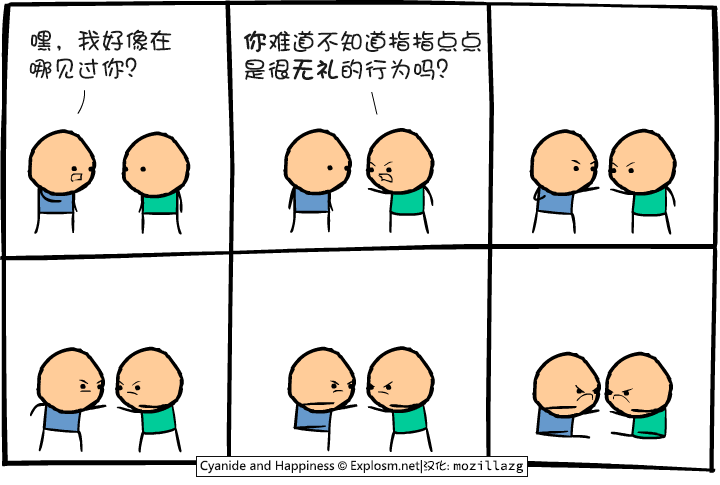
<style>
.page{position:relative;width:720px;height:485px;background:#ffffff}
.page>*{position:absolute;margin:0}
.t1{font:24px/28px "DFPShaoNvW5";color:#1b1b1b}
.t2{font:24px/28px "DFPShaoNvW5";color:#1b1b1b;font-weight:bold}
</style>
<div class="page">
<p class="t1" style="left:29px;top:29px;width:143px;height:50px">嘿，我好像在<br>哪见过你？</p>
<p class="t1" style="left:243px;top:30px;width:238px;height:50px"><span class="t2">你</span>难道不知道指指点点<br>是很<span class="t2">无礼</span>的行为吗？</p>
</div>
